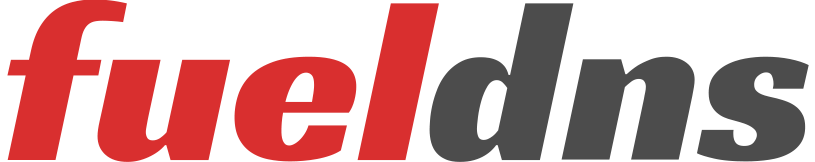
<style>
.page{position:relative;width:815px;height:162px;background:#ffffff}
.page>*{position:absolute;margin:0}
.t1{font:233.3px "RacingSansOne-Regular";color:#d92f2f}
.t2{font:233.3px "RacingSansOne-Regular";color:#4c4c4c}
</style>
<div class="page">
<p class="t1" style="left:7px;top:0px;width:802px;height:162px">fuel<span class="t2">dns</span></p>
</div>
